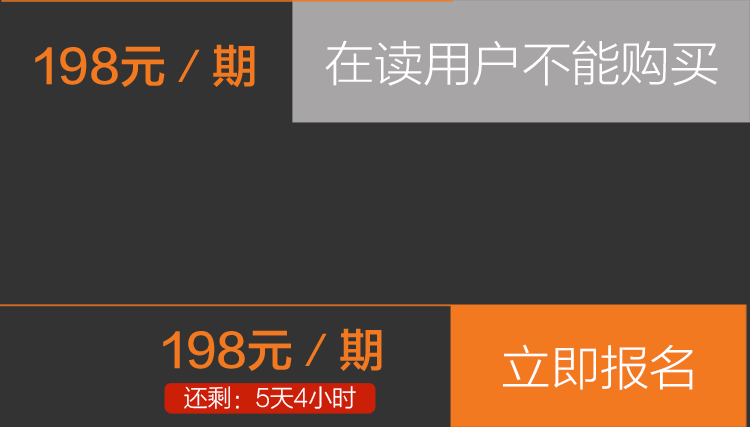
<style>
.page{position:relative;width:750px;height:427px;background:#333333}
.page>*{position:absolute;margin:0}
.t1{font:47.8px "FZLTXHK--GBK1-0";color:#ffffff;scale:1.03 1}
.t2{font:45.9px "FZLTZHK--GBK1-0";color:#f37920}
.t3{font:23.9px "FZLTXHK--GBK1-0";color:#ffffff}
</style>
<div class="page">
<p class="t1" style="left:325px;top:40px;width:393px;height:46px">在读用户不能购买</p>
<p class="t2" style="left:35px;top:44px;width:220px;height:44px">198元／期</p>
<p class="t2" style="left:163px;top:328px;width:219px;height:44px">198元／期</p>
<p class="t1" style="left:503px;top:344px;width:190px;height:46px">立即报名</p>
<p class="t3" style="left:184px;top:386px;width:172px;height:23px">还剩：5天4小时</p>
</div>
